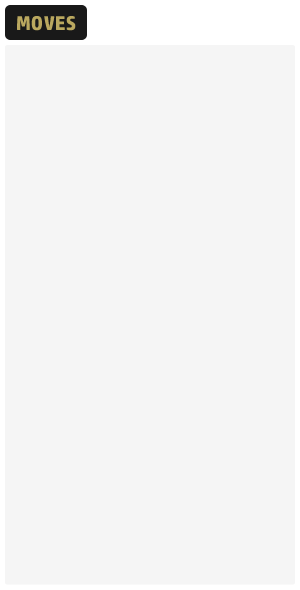
<style>
.page{position:relative;width:300px;height:590px;background:#f5f5f5}
.page>*{position:absolute;margin:0}
.t1{font:20px "HPSimplified-Bold";letter-spacing:0.01em;color:#baa85f}
</style>
<div class="page">
<p class="t1" style="left:17px;top:16px;width:59px;height:15px">MOVES</p>
</div>
